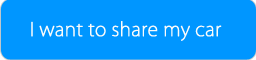
<style>
.page{position:relative;width:256px;height:60px;background:#0096ff}
.page>*{position:absolute;margin:0}
.t1{font:18.4px "KozGoPr6N-ExtraLight";color:#fbfbfb;font-weight:bold}
</style>
<div class="page">
<p class="t1" style="left:31px;top:21px;width:191px;height:20px">I want to share my car</p>
</div>
